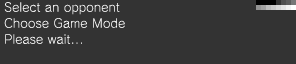
<style>
.page{position:relative;width:296px;height:64px;background:#333333}
.page>*{position:absolute;margin:0}
.t1{font:12px/16px "RodinNTLGPro-L";letter-spacing:0.025em;color:#fefefe}
</style>
<div class="page">
<p class="t1" style="left:4px;top:2px;width:121px;height:42px">Select an opponent<br>Choose Game Mode<br>Please wait...</p>
</div>
